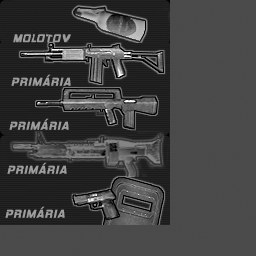
<style>
.page{position:relative;width:256px;height:256px;background:#4a4a4a}
.page>*{position:absolute;margin:0}
.t1{font:11.5px "HemiHeadRg-BoldItalic";letter-spacing:0.08em;color:#9d9d9d;text-transform:uppercase}
</style>
<div class="page">
<p class="t1" style="left:11px;top:74px;width:60px;height:12px">pRIMÁRIA</p>
<p class="t1" style="left:9px;top:118px;width:60px;height:12px">PRIMÁRIA</p>
<p class="t1" style="left:7px;top:162px;width:60px;height:12px">PRIMÁRIA</p>
<p class="t1" style="left:5px;top:206px;width:60px;height:12px">PRIMÁRIA</p>
</div>
